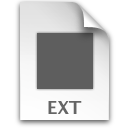
<style>
.page{position:relative;width:128px;height:128px;background:#ffffff}
.page>*{position:absolute;margin:0}
.t1{font:18px "LucidaGrande-Bold";letter-spacing:-0.02em;color:#656565}
</style>
<div class="page">
<p class="t1" style="left:48px;top:101px;width:34px;height:13px">EXT</p>
</div>
